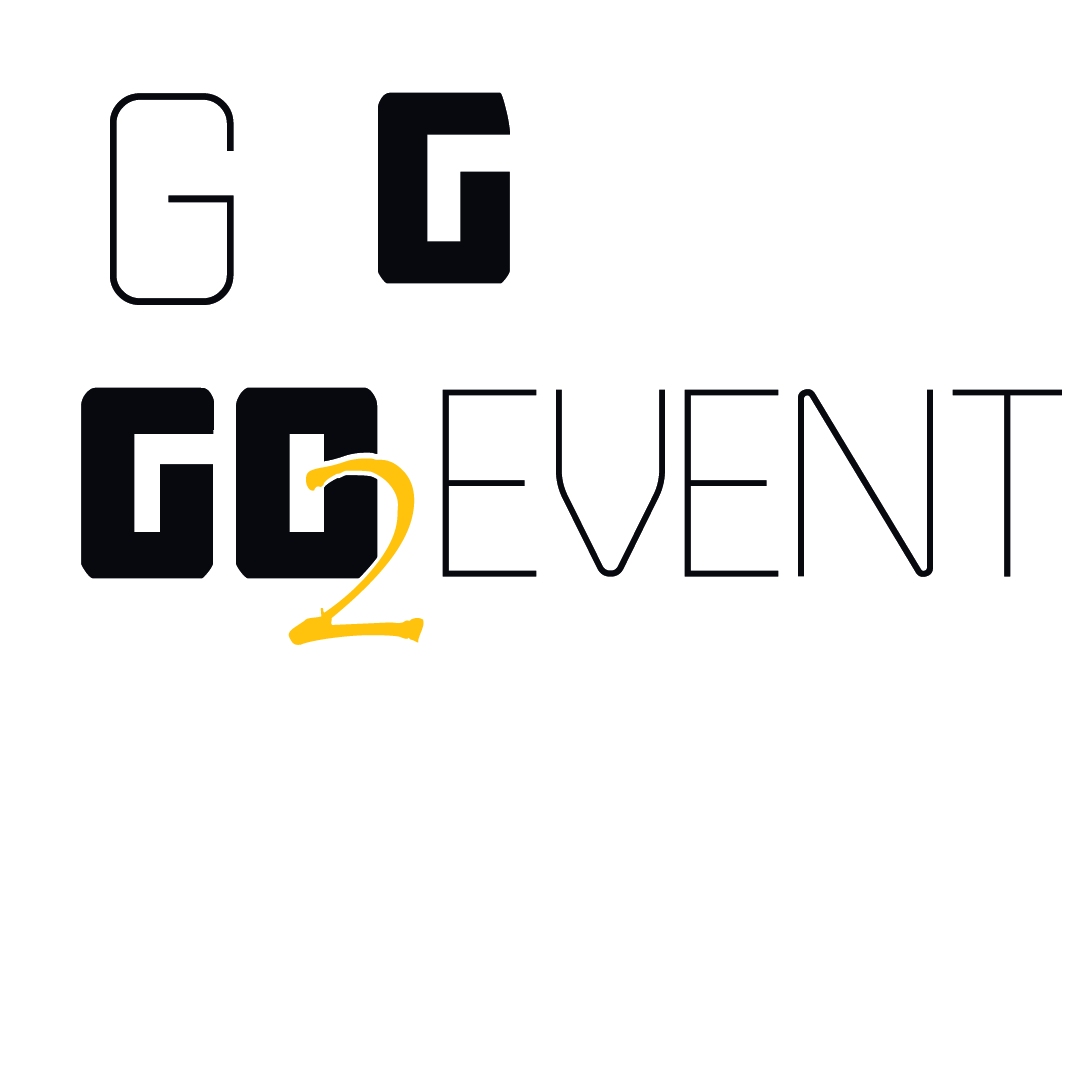
<style>
.page{position:relative;width:1080px;height:1080px;background:#ffffff}
.page>*{position:absolute;margin:0}
.t1{font:306.7px "235MKSDUltraLightAl";color:#08090e}
.t2{font:306.7px "BuchananBold";color:#08090e}
.t3{font:270.7px "235MKSDUltraLightAl";color:#08090e}
.t4{font:270.7px "TempusSansITC";color:#ffc30d}
</style>
<div class="page">
<p class="t1" style="left:110px;top:93px;width:124px;height:212px">G</p>
<p class="t2" style="left:81px;top:387px;width:297px;height:192px">GO</p>
<p class="t3" style="left:442px;top:389px;width:620px;height:188px">EVENT</p>
<p class="t4" style="left:288px;top:458px;width:136px;height:187px">2</p>
</div>
